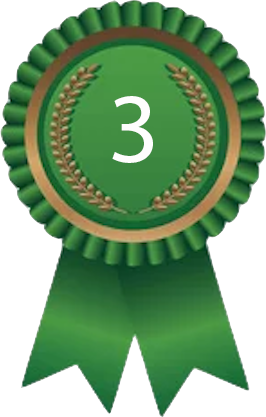
<style>
.page{position:relative;width:266px;height:417px;background:#ffffff}
.page>*{position:absolute;margin:0}
.t1{font:100px "MyriadPro-Regular";color:#fefdfd}
</style>
<div class="page">
<p class="t1" style="left:112px;top:96px;width:41px;height:67px">3</p>
</div>
